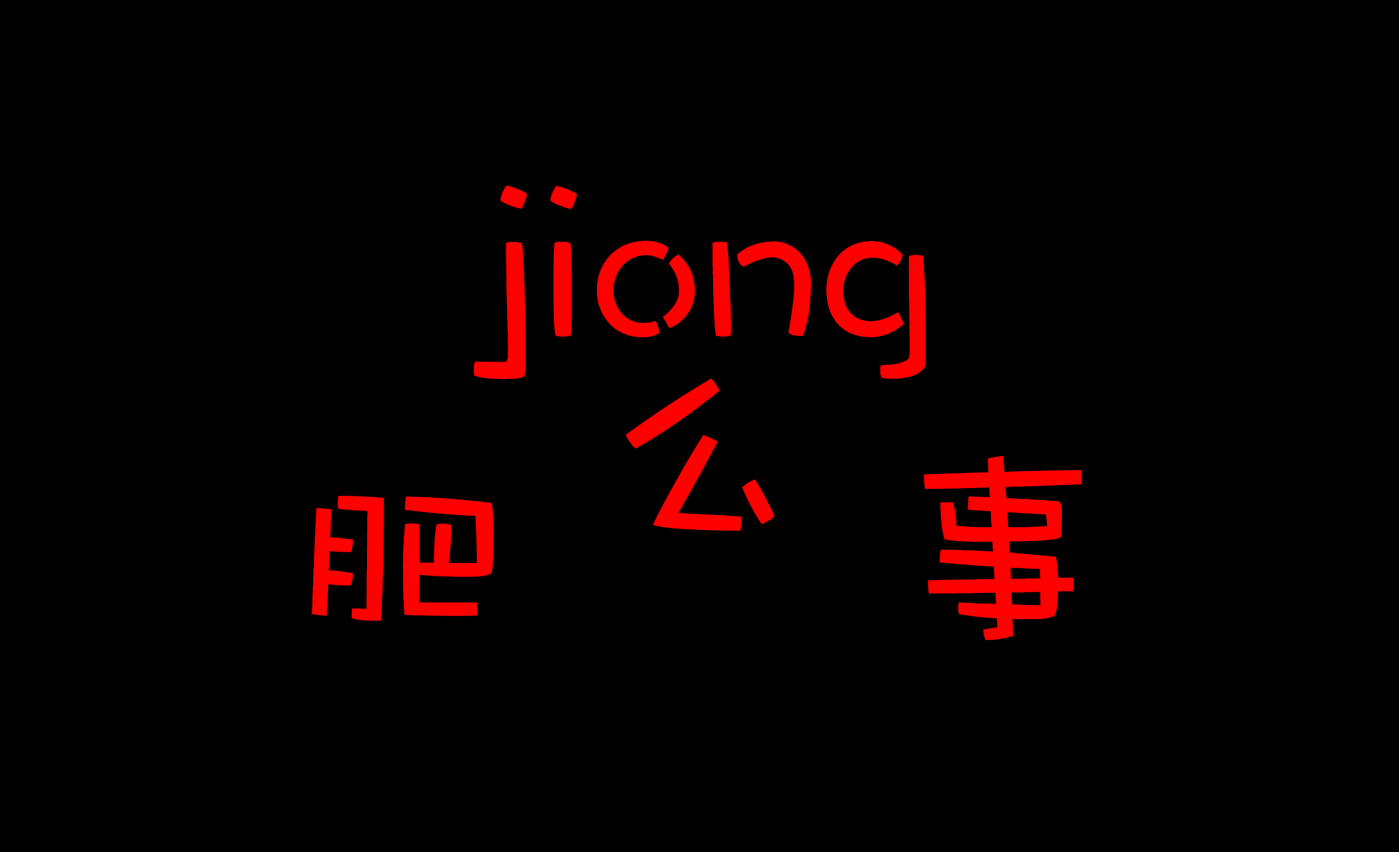
<style>
.page{position:relative;width:1399px;height:852px;background:#000000}
.page>*{position:absolute;margin:0}
.t1{font:224.7px "DFWaWaSC-W5";color:#ff0000}
</style>
<div class="page">
<p class="t1" style="left:473px;top:186px;width:453px;height:194px">jiong</p>
<p class="t1" style="left:625px;top:378px;width:149px;height:153px">么</p>
<p class="t1" style="left:312px;top:456px;width:770px;height:184px">肥     事</p>
</div>
